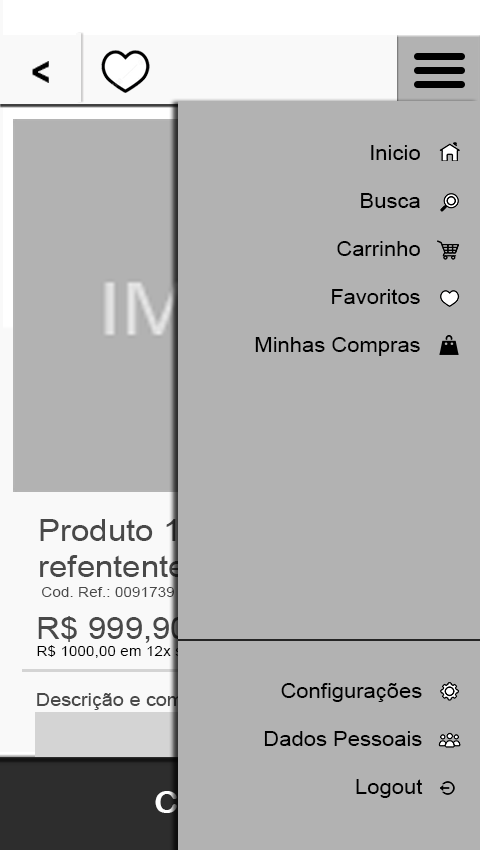
<style>
.page{position:relative;width:480px;height:850px;background:#b2b2b2}
.page>*{position:absolute;margin:0}
.t1{font:20px "ArialMT";color:#000000;scale:1.1 1}
.t2{font:30px "ArialMT";scale:1.1 1}
.t3{font:14px "ArialMT";color:#494949;scale:1.1 1}
.t4{font:14px "ArialMT";color:#000000;scale:1.1 1}
.t5{font:30px "ArialMT";color:#494949;scale:1.1 1}
.t6{font:18px "ArialMT";scale:1.1 1}
</style>
<div class="page">
<p class="t1" style="left:255px;top:145px;width:165px;height:211px;text-align:right">Inicio<br><br>Busca<br><br>Carrinho<br><br>Favoritos<br><br>Minhas Compras</p>
<p class="t2" style="left:40px;top:519px;width:367px;height:64px">Produto 1 - descrição<br>refentente ao produto 1...</p>
<p class="t3" style="left:42px;top:587px;width:132px;height:10px">Cod. Ref.: 0091739</p>
<p class="t4" style="left:37px;top:616px;width:205px;height:43px"><span class="t5">R$ 999,90 </span>á vista<br>R$ 1000,00 em 12x sem juros</p>
<p class="t1" style="left:264px;top:683px;width:159px;height:115px;text-align:right">Configurações<br><br>Dados Pessoais<br><br>Logout</p>
<p class="t6" style="left:37px;top:692px;width:285px;height:18px">Descrição e comentários abaixo:</p>
</div>
